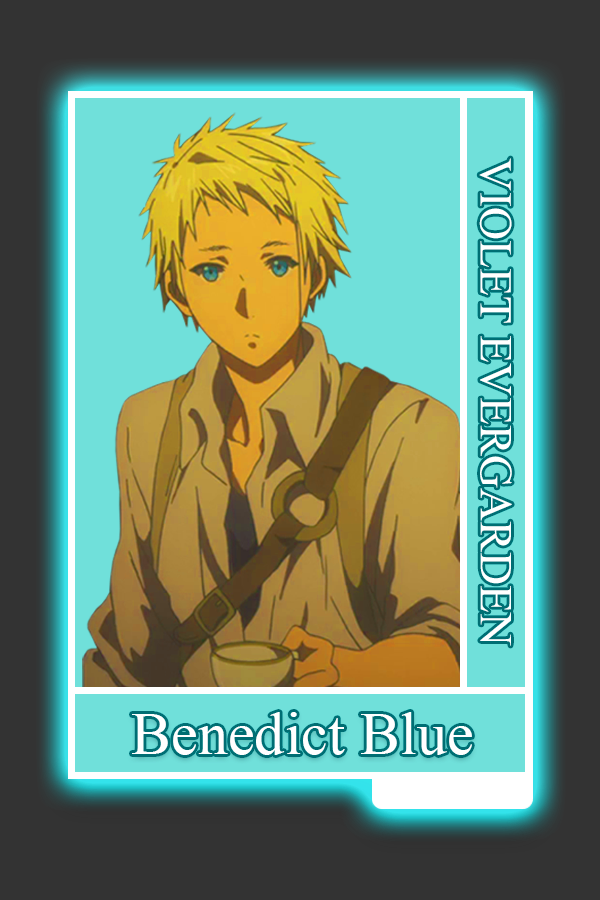
<style>
.page{position:relative;width:600px;height:900px;background:#333333}
.page>*{position:absolute;margin:0}
.t1{font:45.8px "TimesNewRomanPSMT";color:#ffffff}
.t2{font:60.3px "TimesNewRomanPSMT";color:#ffffff}
</style>
<div class="page">
<p class="t1" style="left:479px;top:158px;width:33px;height:488px;rotate:90deg">VIOLET EVERGARDEN</p>
<p class="t2" style="left:132px;top:712px;width:340px;height:43px">Benedict Blue</p>
</div>
